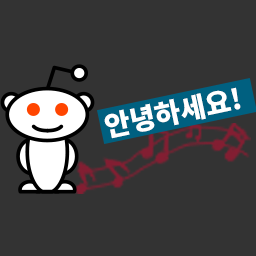
<style>
.page{position:relative;width:256px;height:256px;background:#333333}
.page>*{position:absolute;margin:0}
.t1{font:27.8px "NotoSansCJKtc-Black";color:#ffffff}
</style>
<div class="page">
<p class="t1" style="left:104px;top:87px;width:137px;height:52px;rotate:-12deg">안녕하세요!</p>
</div>
